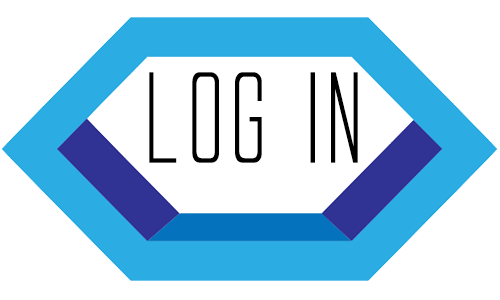
<style>
.page{position:relative;width:500px;height:300px;background:#ffffff}
.page>*{position:absolute;margin:0}
.t1{font:120px "AlienLeague";letter-spacing:-0.1em;color:#000000}
.t2{font:90px "AlienLeague";letter-spacing:-0.1em;color:#000000}
</style>
<div class="page">
<p class="t1" style="left:149px;top:72px;width:209px;height:91px;text-align:justify">log in<br><span class="t2"><br>iN</span></p>
</div>
